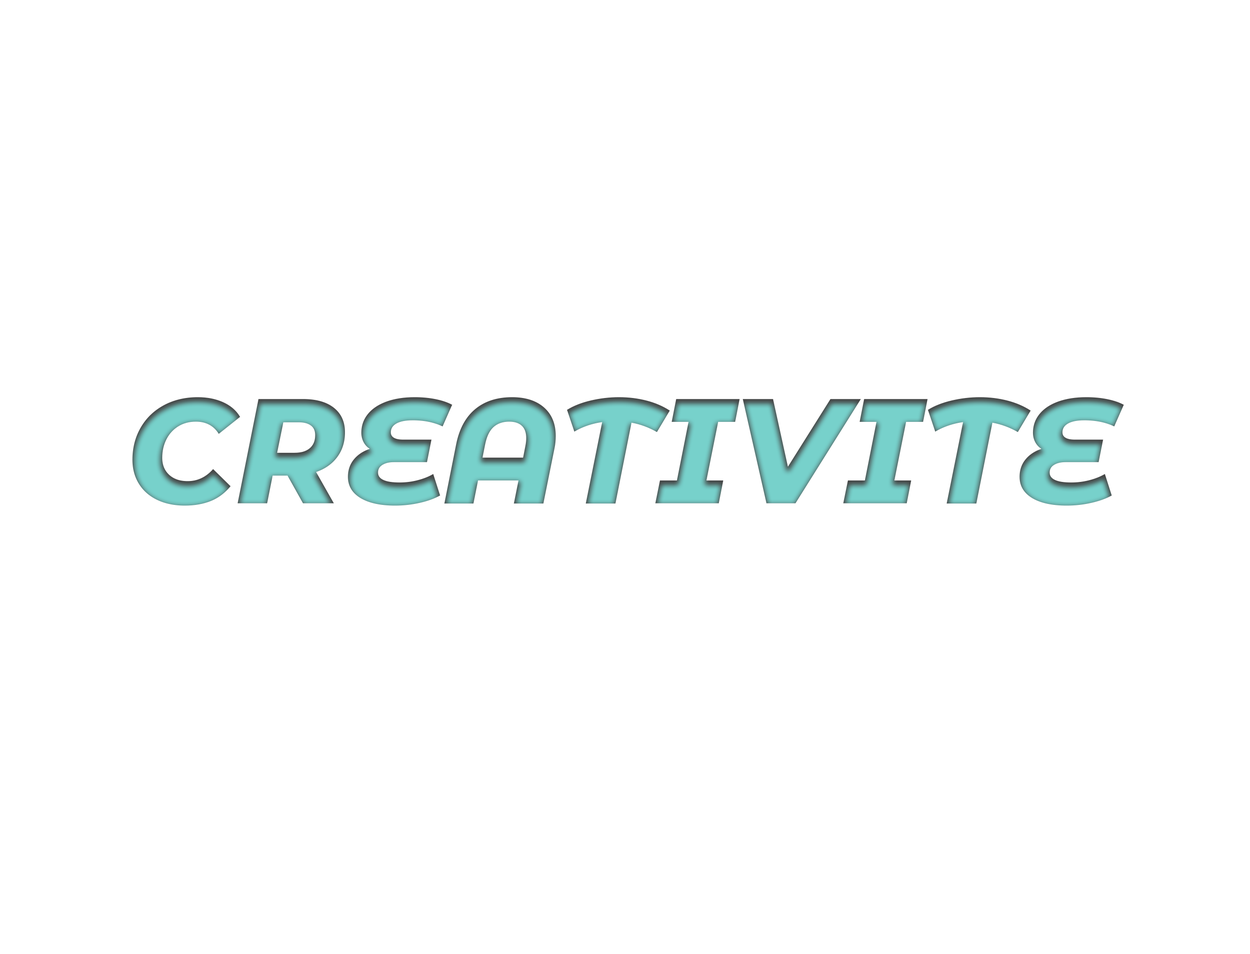
<style>
.page{position:relative;width:1250px;height:954px;background:#ffffff}
.page>*{position:absolute;margin:0}
.t1{font:148.8px "MontserratAlternates-ExtraBoldItalic"}
</style>
<div class="page">
<p class="t1" style="left:132px;top:397px;width:992px;height:109px">CREATIVITE</p>
</div>
